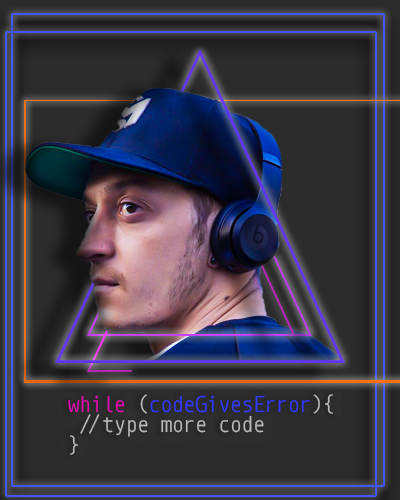
<style>
.page{position:relative;width:400px;height:500px}
.page>*{position:absolute;margin:0}
.t1{font:17.4px "Monoid-Regular";color:#b8b8b8}
.t2{font:17.4px "Monoid-Regular";color:#e008b1}
.t3{font:17.4px "Monoid-Regular";color:#3239ff}
</style>
<div class="page">
<p class="t1" style="left:68px;top:394px;width:265px;height:61px"><span class="t2">while</span> (<span class="t3">codeGivesError</span>){<br> //type more code<br>}</p>
</div>
